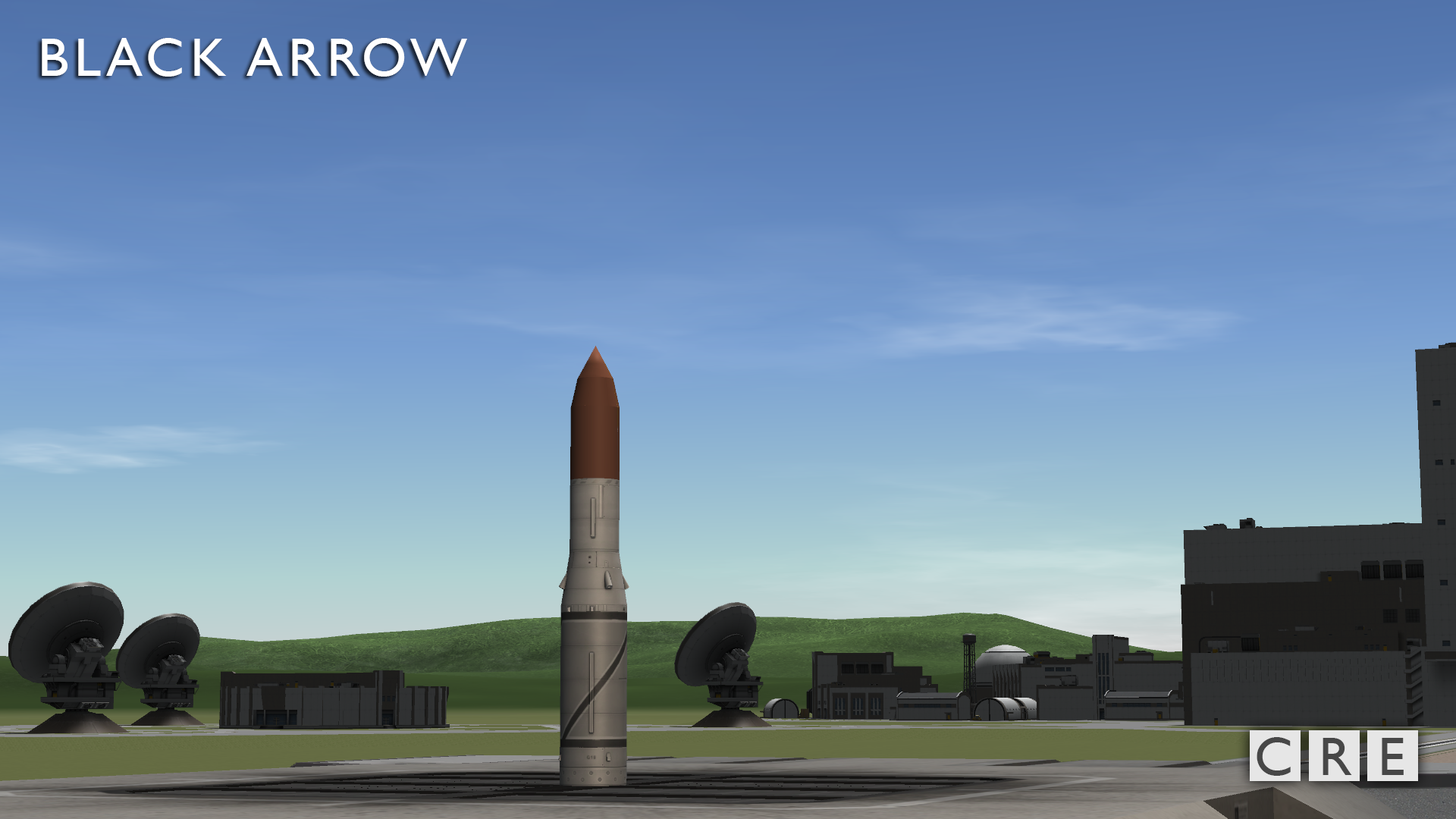
<style>
.page{position:relative;width:1456px;height:819px}
.page>*{position:absolute;margin:0}
.t1{font:54.6px "GillSansMT";letter-spacing:0.1em;color:#ffffff}
.t2{font:54.6px "GillSansMT";letter-spacing:0.1em;color:#474747}
</style>
<div class="page">
<p class="t1" style="left:42px;top:38px;width:425px;height:39px">BLACK ARROW</p>
<p class="t2" style="left:1257px;top:737px;width:147px;height:39px">C R E</p>
</div>
